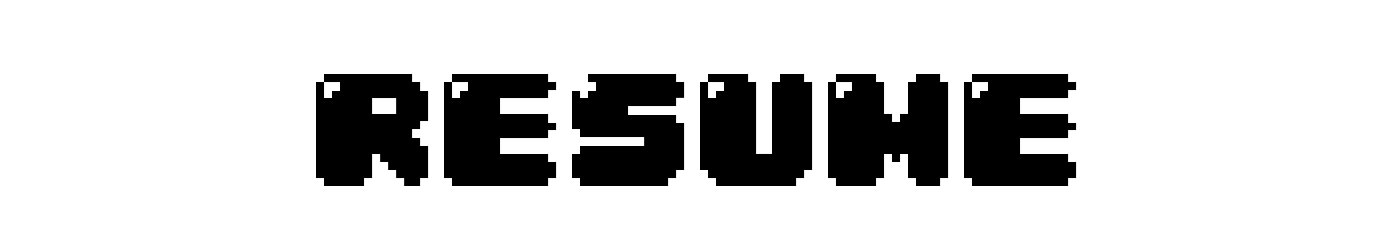
<style>
.page{position:relative;width:1400px;height:250px;background:#ffffff}
.page>*{position:absolute;margin:0}
.t1{font:136.1px "04b30";color:#000000}
</style>
<div class="page">
<p class="t1" style="left:316px;top:74px;width:761px;height:112px">RESUME</p>
</div>
